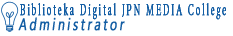
<style>
.page{position:relative;width:233px;height:36px;background:#ffffff}
.page>*{position:absolute;margin:0}
.t1{font:16.2px "Minion-Regular";letter-spacing:0.2em;color:#135da3;font-weight:bold;scale:0.54 1}
</style>
<div class="page">
<p class="t1" style="left:20px;top:3px;width:206px;height:17px">Biblioteka Digital JPN MEDIA College</p>
</div>
